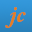
<style>
.page{position:relative;width:32px;height:32px}
.page>*{position:absolute;margin:0}
.t1{font:24px "AGaramondPro-BoldItalic";color:#e67e22}
</style>
<div class="page">
<p class="t1" style="left:5px;top:7px;width:21px;height:21px">jc</p>
</div>
